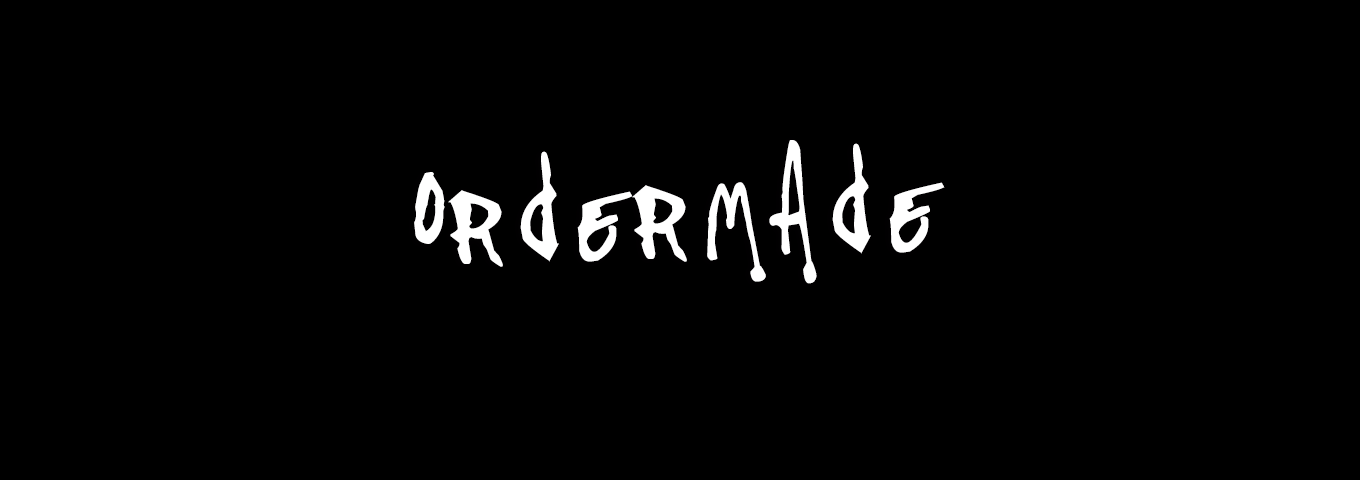
<style>
.page{position:relative;width:1360px;height:480px;background:#000000}
.page>*{position:absolute;margin:0}
.t1{font:340.5px "Pappo'sBluesBandOfficialFont";letter-spacing:0.024em;color:#ffffff;scale:1.12 1}
</style>
<div class="page">
<p class="t1" style="left:414px;top:140px;width:531px;height:144px;rotate:-2deg">ordermade</p>
</div>
